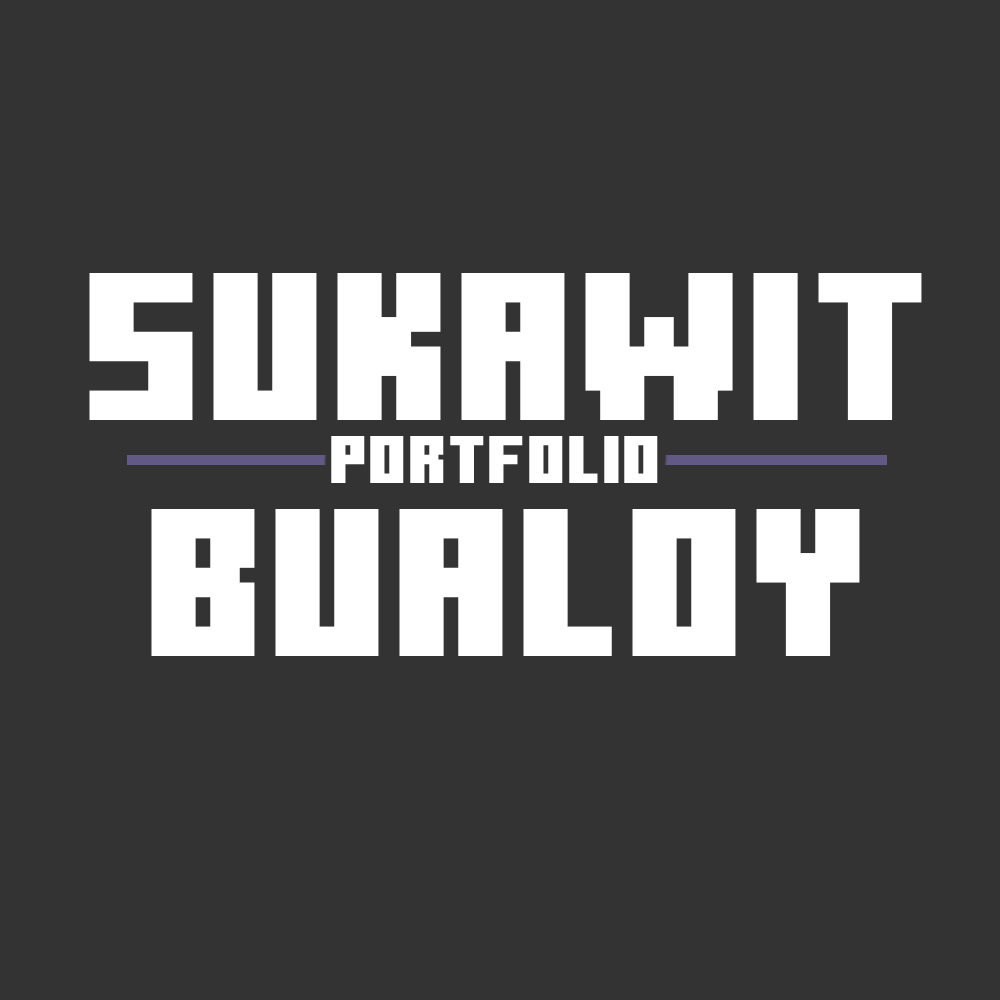
<style>
.page{position:relative;width:1000px;height:1000px;background:#333333}
.page>*{position:absolute;margin:0}
.t1{font:210.1px "MinecraftTen";color:#ffffff}
.t2{font:67.2px "MinecraftTen";color:#ffffff}
</style>
<div class="page">
<p class="t1" style="left:89px;top:273px;width:833px;height:147px">SUKAWIT</p>
<p class="t2" style="left:331px;top:436px;width:327px;height:47px">portfolio</p>
<p class="t1" style="left:151px;top:509px;width:709px;height:147px">Bualoy</p>
</div>
